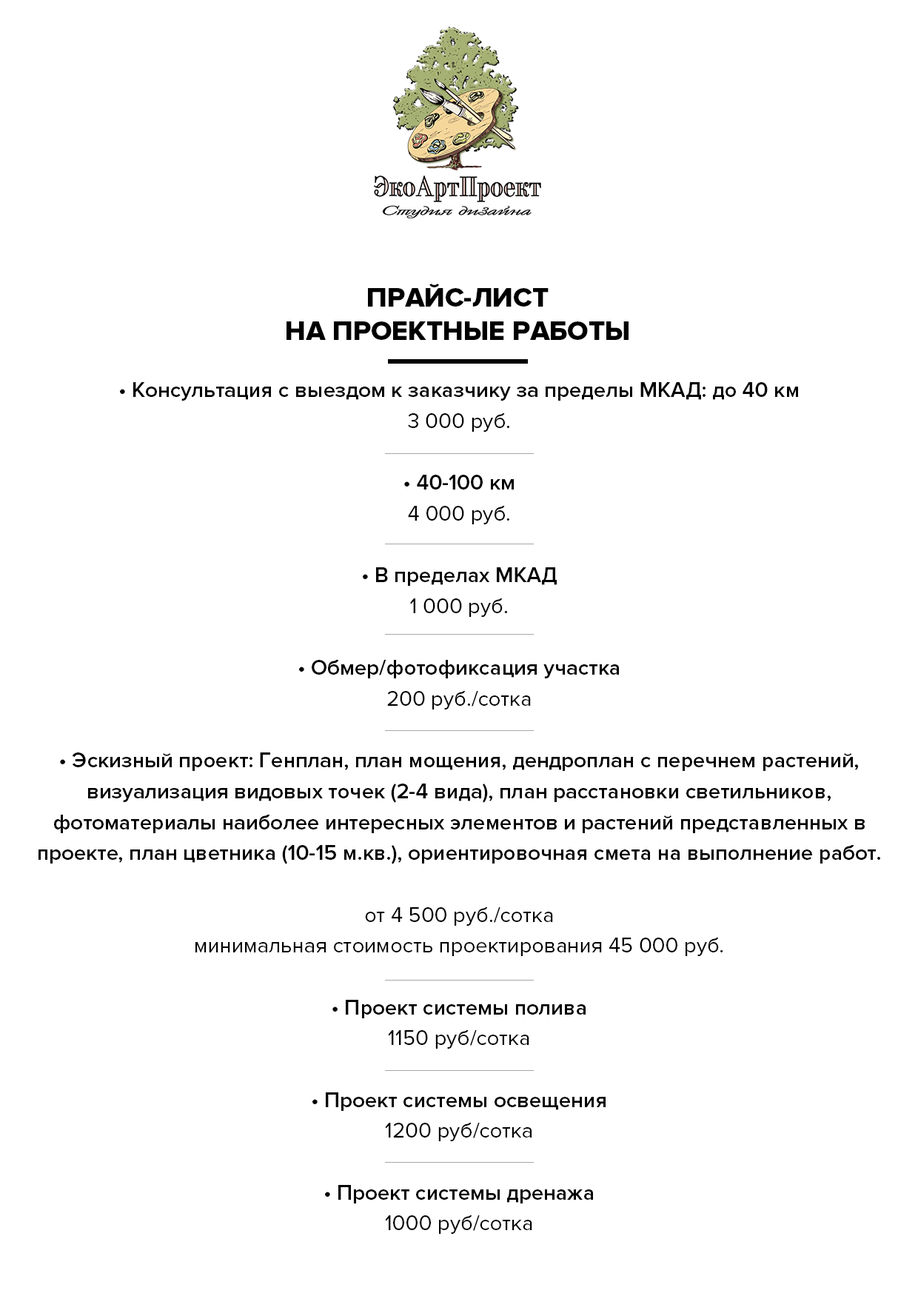
<style>
.page{position:relative;width:918px;height:1299px;background:#ffffff}
.page>*{position:absolute;margin:0}
.t1{font:27.8px "ProximaNova-Extrabld";color:#000000;text-transform:uppercase}
.t2{font:21.6px/30.9px "ProximaNova-Semibold";color:#000000}
.t3{font:21.6px/30.9px "ProximaNova-Regular";color:#000000}
</style>
<div class="page">
<p class="t1" style="left:287px;top:284px;width:342px;height:56px;text-align:center">Прайс-лист<br>на проектные работы</p>
<p class="t2" style="left:39px;top:382px;width:841px;height:852px;text-align:center">• Консультация с выездом к заказчику за пределы МКАД: до 40 км<br><span class="t3">3 000 руб.<br><br></span>• 40-100 км<br><span class="t3">4 000 руб.<br><br></span>• В пределах МКАД<br><span class="t3">1 000 руб.<br><br></span>• Обмер/фотофиксация участка<br><span class="t3">200 руб./сотка<br><br></span>• Эскизный проект: Генплан, план мощения, дендроплан с перечнем растений, визуализация видовых точек (2-4 вида), план расстановки светильников, фотоматериалы наиболее интересных элементов и растений представленных в проекте, план цветника (10-15 м.кв.), ориентировочная смета на выполнение работ.<br><br><span class="t3">от 4 500 руб./сотка<br>минимальная стоимость проектирования 45 000 руб.<br><br></span>• Проект системы полива<br><span class="t3">1150 руб/сотка<br><br></span>• Проект системы освещения<br><span class="t3">1200 руб/сотка<br><br></span>• Проект системы дренажа<span class="t3"><br>1000 руб/сотка</span></p>
</div>
